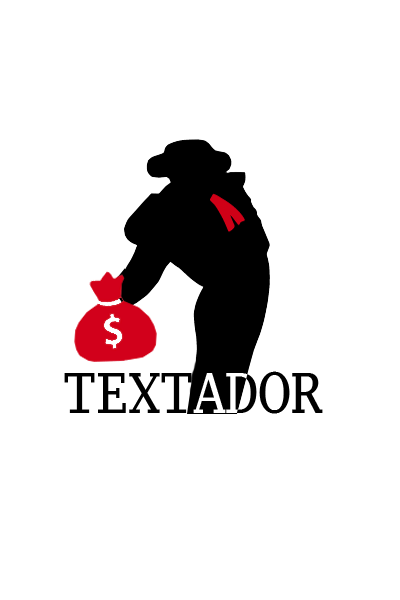
<style>
.page{position:relative;width:400px;height:600px;background:#ffffff}
.page>*{position:absolute;margin:0}
.t1{font:55px "GoMonoForPowerline";letter-spacing:-0.01em;color:#000000}
</style>
<div class="page">
<p class="t1" style="left:64px;top:371px;width:259px;height:43px">TEXTADOR</p>
</div>
